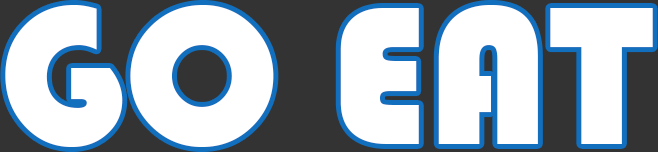
<style>
.page{position:relative;width:658px;height:152px;background:#ffffff}
.page>*{position:absolute;margin:0}
.t1{font:204px "Bauhaus93";color:#ffffff}
</style>
<div class="page">
<p class="t1" style="left:5px;top:5px;width:648px;height:142px">GO EAT</p>
</div>
